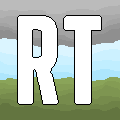
<style>
.page{position:relative;width:120px;height:120px;background:#ffffff}
.page>*{position:absolute;margin:0}
.t1{font:116.7px "BigNoodleTitling";letter-spacing:0.03em;color:#ffffff;font-weight:bold}
</style>
<div class="page">
<p class="t1" style="left:18px;top:16px;width:83px;height:88px">RT</p>
</div>
